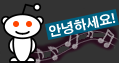
<style>
.page{position:relative;width:119px;height:63px;background:#333333}
.page>*{position:absolute;margin:0}
.t1{font:12.8px "AdobeGothicStd-Bold";color:#ffffff}
</style>
<div class="page">
<p class="t1" style="left:49px;top:13px;width:67px;height:25px;rotate:-12deg">안녕하세요!</p>
</div>
